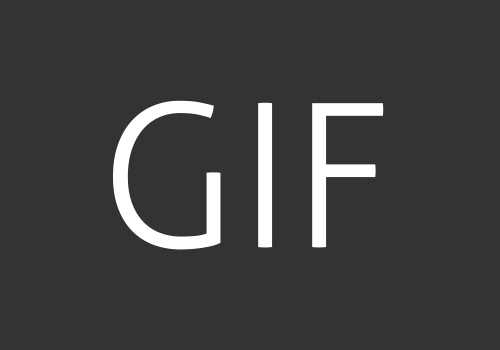
<style>
.page{position:relative;width:500px;height:350px;background:#333333}
.page>*{position:absolute;margin:0}
.t1{font:200px "Aller-Light";color:#ffffff}
</style>
<div class="page">
<p class="t1" style="left:113px;top:100px;width:271px;height:150px">GIF</p>
</div>
